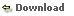
<style>
.page{position:relative;width:74px;height:16px;background:#ffffff}
.page>*{position:absolute;margin:0}
.t1{font:9px "Verdana-Bold";color:#5b5b5b}
</style>
<div class="page">
<p class="t1" style="left:16px;top:3px;width:48px;height:8px">Download</p>
</div>
